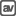
<style>
.page{position:relative;width:16px;height:16px;background:#555555}
.page>*{position:absolute;margin:0}
.t1{font:12px "Helvetica-Bold";letter-spacing:-0.18em;color:#555555}
</style>
<div class="page">
<p class="t1" style="left:3px;top:5px;width:11px;height:7px">av</p>
</div>
